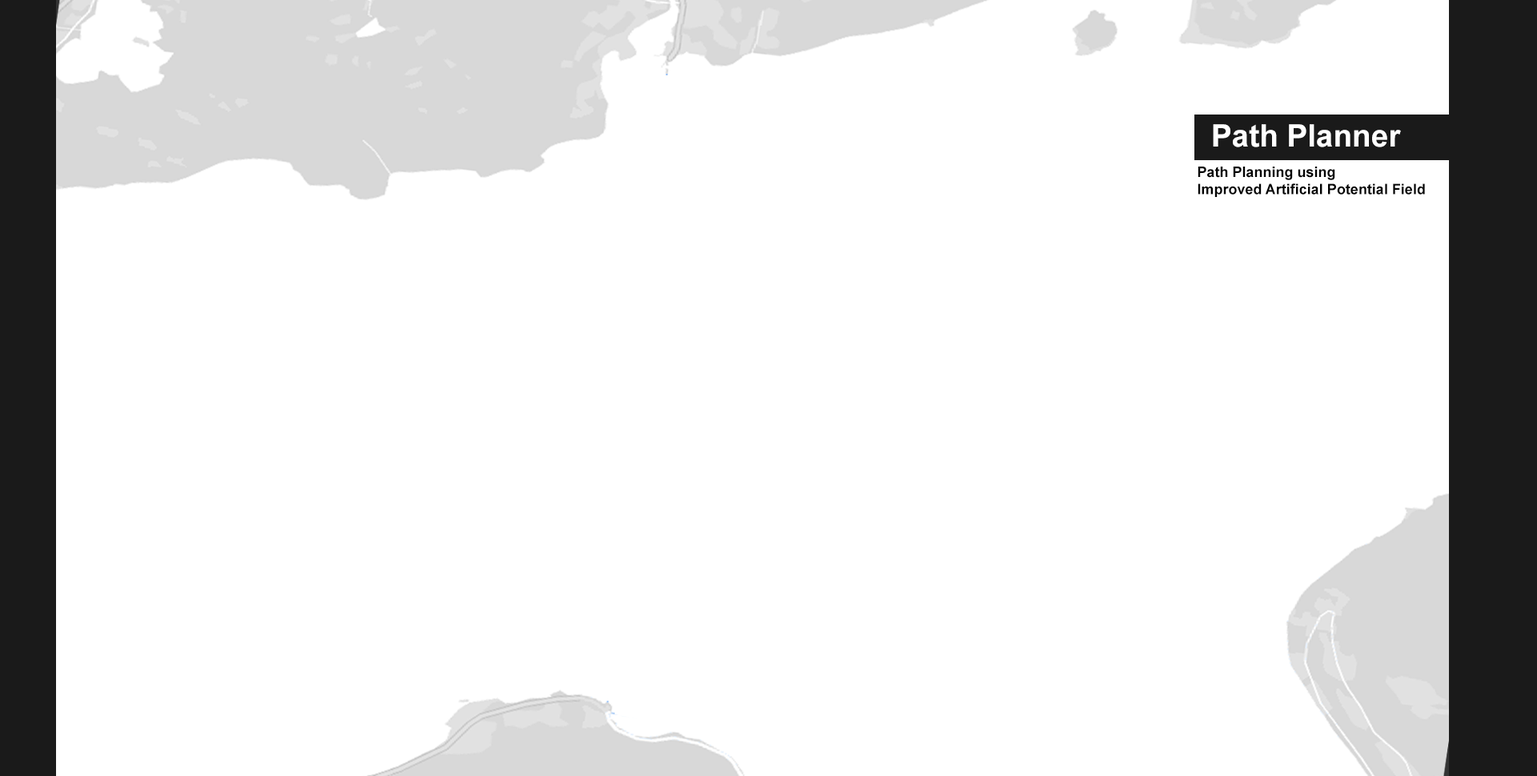
<style>
.page{position:relative;width:1537px;height:776px;background:#ffffff}
.page>*{position:absolute;margin:0}
.t1{font:30.9px "Arial-BoldMT";color:#ffffff}
.t2{font:14.4px/17.2px "Arial-BoldMT";color:#000000}
</style>
<div class="page">
<p class="t1" style="left:1213px;top:124px;width:188px;height:23px">Path Planner</p>
<p class="t2" style="left:1198px;top:167px;width:227px;height:30px">Path Planning using <br>Improved Artificial Potential Field</p>
</div>
